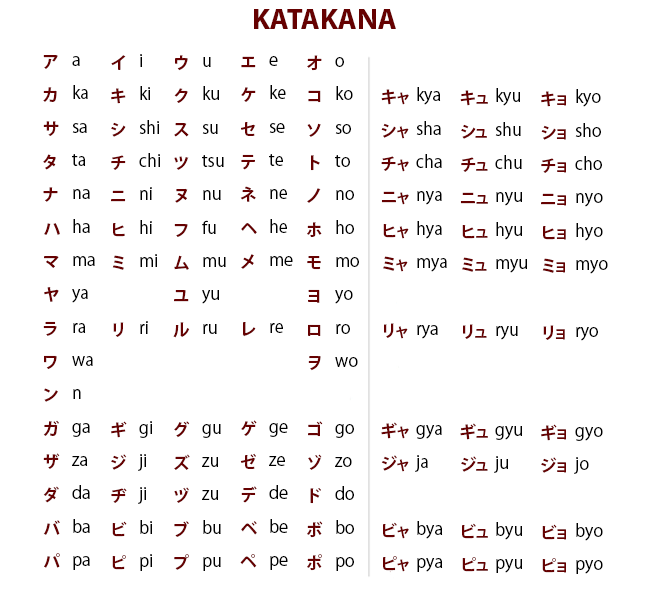
<style>
.page{position:relative;width:650px;height:607px;background:#ffffff}
.page>*{position:absolute;margin:0}
.t1{font:29.2px "MyriadPro-Bold";color:#660101}
.t2{font:16.7px/33.3px "KozGoPr6N-Regular";color:#000000}
.t3{font:16.7px/33.3px "KozGoPr6N-Bold";color:#660101}
</style>
<div class="page">
<p class="t1" style="left:254px;top:9px;width:142px;height:20px">KATAKANA</p>
<p class="t2" style="left:138px;top:54px;width:22px;height:517px">i<br>ki<br>shi<br>chi<br>ni<br>hi<br>mi<br><br>ri<br><br><br>gi<br>ji<br>ji<br>bi<br>pi</p>
<p class="t3" style="left:43px;top:55px;width:17px;height:513px">ア<br>カ<br>サ<br>タ<br>ナ<br>ハ<br>マ<br>ヤ<br>ラ<br>ワ<br>ン<br>ガ<br>ザ<br>ダ<br>バ<br>パ</p>
<p class="t2" style="left:72px;top:56px;width:23px;height:514px">a<br>ka<br>sa<br>ta<br>na<br>ha<br>ma<br>ya<br>ra<br>wa<br>n<br>ga<br>za<br>da<br>ba<br>pa</p>
<p class="t3" style="left:111px;top:55px;width:16px;height:515px;text-align:center">イ<br>キ<br>シ<br>チ<br>ニ<br>ヒ<br>ミ<br><br>リ<br><br><br>ギ<br>ジ<br>ヂ<br>ビ<br>ピ</p>
<p class="t3" style="left:173px;top:55px;width:17px;height:515px;text-align:center">ウ<br>ク<br>ス<br>ツ<br>ヌ<br>フ<br>ム<br>ユ<br>ル<br><br><br>グ<br>ズ<br>ヅ<br>ブ<br>プ</p>
<p class="t2" style="left:202px;top:57px;width:24px;height:514px">u<br>ku<br>su<br>tsu<br>nu<br>fu<br>mu<br>yu<br>ru<br><br><br>gu<br>zu<br>zu<br>bu<br>pu</p>
<p class="t3" style="left:240px;top:56px;width:17px;height:512px;text-align:center">エ<br>ケ<br>セ<br>テ<br>ネ<br>ヘ<br>メ<br><br>レ<br><br><br>ゲ<br>ゼ<br>デ<br>ベ<br>ペ</p>
<p class="t2" style="left:269px;top:56px;width:24px;height:514px">e<br>ke<br>se<br>te<br>ne<br>he<br>me<br><br>re<br><br><br>ge<br>ze<br>de<br>be<br>pe</p>
<p class="t3" style="left:307px;top:55px;width:16px;height:516px;text-align:center">オ<br>コ<br>ソ<br>ト<br>ノ<br>ホ<br>モ<br>ヨ<br>ロ<br>ヲ<br><br>ゴ<br>ゾ<br>ド<br>ボ<br>ポ</p>
<p class="t2" style="left:335px;top:57px;width:24px;height:514px">o<br>ko<br>so<br>to<br>no<br>ho<br>mo<br>yo<br>ro<br>wo<br><br>go<br>zo<br>do<br>bo<br>po</p>
<p class="t3" style="left:381px;top:89px;width:28px;height:483px;text-align:center">キャ<br>シャ<br>チャ<br>ニャ<br>ヒャ<br>ミャ<br><br>リャ<br><br><br>ギャ<br>ジャ<br><br>ビャ<br>ピャ</p>
<p class="t2" style="left:415px;top:87px;width:32px;height:485px">kya<br>sha<br>cha<br>nya<br>hya<br>mya<br><br>rya<br><br><br>gya<br>ja<br><br>bya<br>pya</p>
<p class="t2" style="left:494px;top:88px;width:33px;height:485px">kyu<br>shu<br>chu<br>nyu<br>hyu<br>myu<br><br>ryu<br><br><br>gyu<br>ju<br><br>byu<br>pyu</p>
<p class="t2" style="left:574px;top:89px;width:34px;height:485px">kyo<br>sho<br>cho<br>nyo<br>hyo<br>myo<br><br>ryo<br><br><br>gyo<br>jo<br><br>byo<br>pyo</p>
<p class="t3" style="left:460px;top:90px;width:28px;height:482px;text-align:center">キュ<br>シュ<br>チュ<br>ニュ<br>ヒュ<br>ミュ<br><br>リュ<br><br><br>ギュ<br>ジュ<br><br>ビュ<br>ピュ</p>
<p class="t3" style="left:541px;top:91px;width:25px;height:482px;text-align:center">キョ<br>ショ<br>チョ<br>ニョ<br>ヒョ<br>ミョ<br><br>リョ<br><br><br>ギョ<br>ジョ<br><br>ビョ<br>ピョ</p>
</div>
